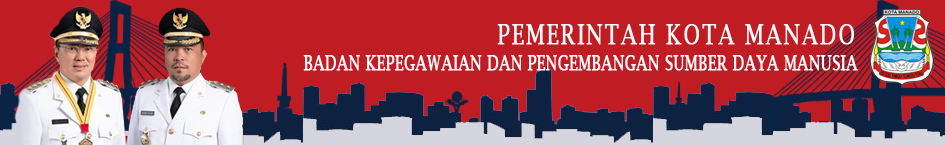
<style>
.page{position:relative;width:945px;height:145px;background:#c01c23}
.page>*{position:absolute;margin:0}
.t1{font:28.1px "LucidaBright";letter-spacing:0.075em;color:#fefefe;font-weight:bold;scale:0.76 1}
.t2{font:20.9px "LucidaBright";color:#fefefe;font-weight:bold;scale:0.73 1}
</style>
<div class="page">
<p class="t1" style="left:497px;top:24px;width:357px;height:21px">PEMERINTAH KOTA MANADO</p>
<p class="t2" style="left:303px;top:55px;width:555px;height:16px">BADAN KEPEGAWAIAN DAN PENGEMBANGAN SUMBER DAYA MANUSIA</p>
</div>
